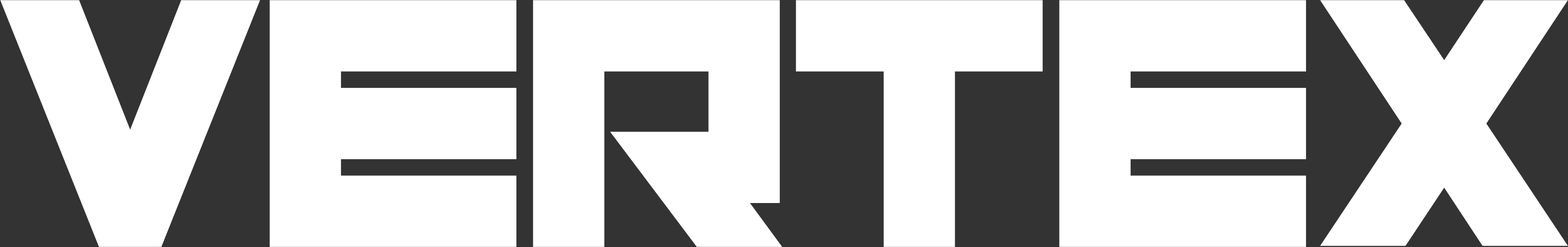
<style>
.page{position:relative;width:1568px;height:247px;background:#ffffff}
.page>*{position:absolute;margin:0}
.t1{font:350.8px "solaria";color:#ffffff}
</style>
<div class="page">
<p class="t1" style="left:0px;top:0px;width:1568px;height:247px">VERTEX</p>
</div>
